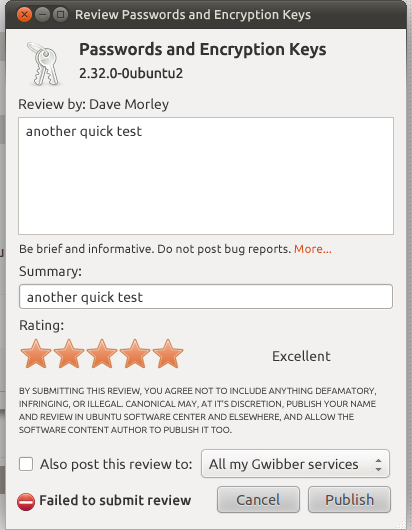
<style>
.page{position:relative;width:412px;height:530px;background:#f2f1f0}
.page>*{position:absolute;margin:0}
.t1{font:13px "Ubuntu-Medium";color:#dfdbd2}
.t2{font:17px/23px "Ubuntu-Medium";color:#333333}
.t3{font:14px/23px "Ubuntu";color:#333333}
.t4{font:14px "Ubuntu";color:#333333}
.t5{font:12px "Ubuntu";color:#333333}
.t6{font:12px "Ubuntu";color:#dd4814}
.t7{font:9px/13px "Ubuntu";color:#333333;text-transform:uppercase}
.t8{font:14px "Ubuntu-Medium";color:#333333}
</style>
<div class="page">
<p class="t1" style="left:76px;top:9px;width:235px;height:13px">Review Passwords and Encryption Keys</p>
<p class="t2" style="left:79px;top:41px;width:247px;height:38px">Passwords and Encryption Keys<br><span class="t3">2.32.0-0ubuntu2</span></p>
<p class="t4" style="left:19px;top:98px;width:150px;height:14px">Review by: Dave Morley</p>
<p class="t4" style="left:26px;top:125px;width:116px;height:14px">another quick test</p>
<p class="t5" style="left:20px;top:243px;width:311px;height:13px">Be brief and informative. Do not post bug reports. <span class="t6">More...</span></p>
<p class="t4" style="left:19px;top:266px;width:62px;height:13px">Summary:</p>
<p class="t4" style="left:27px;top:291px;width:116px;height:14px">another quick test</p>
<p class="t4" style="left:20px;top:319px;width:44px;height:14px">Rating:</p>
<p class="t4" style="left:273px;top:350px;width:58px;height:11px">Excellent</p>
<p class="t7" style="left:19px;top:387px;width:357px;height:46px">By submitting this review, you agree not to include anything defamatory, infringing, or illegal. Canonical may, at it’s discretion, publish your name and review in Ubuntu Software Center and elsewhere, and allow the software content author to publish it too.</p>
<p class="t4" style="left:40px;top:458px;width:152px;height:14px">Also post this review to:</p>
<p class="t4" style="left:209px;top:458px;width:149px;height:14px">All my Gwibber services</p>
<p class="t8" style="left:40px;top:494px;width:151px;height:12px">Failed to submit review</p>
</div>
